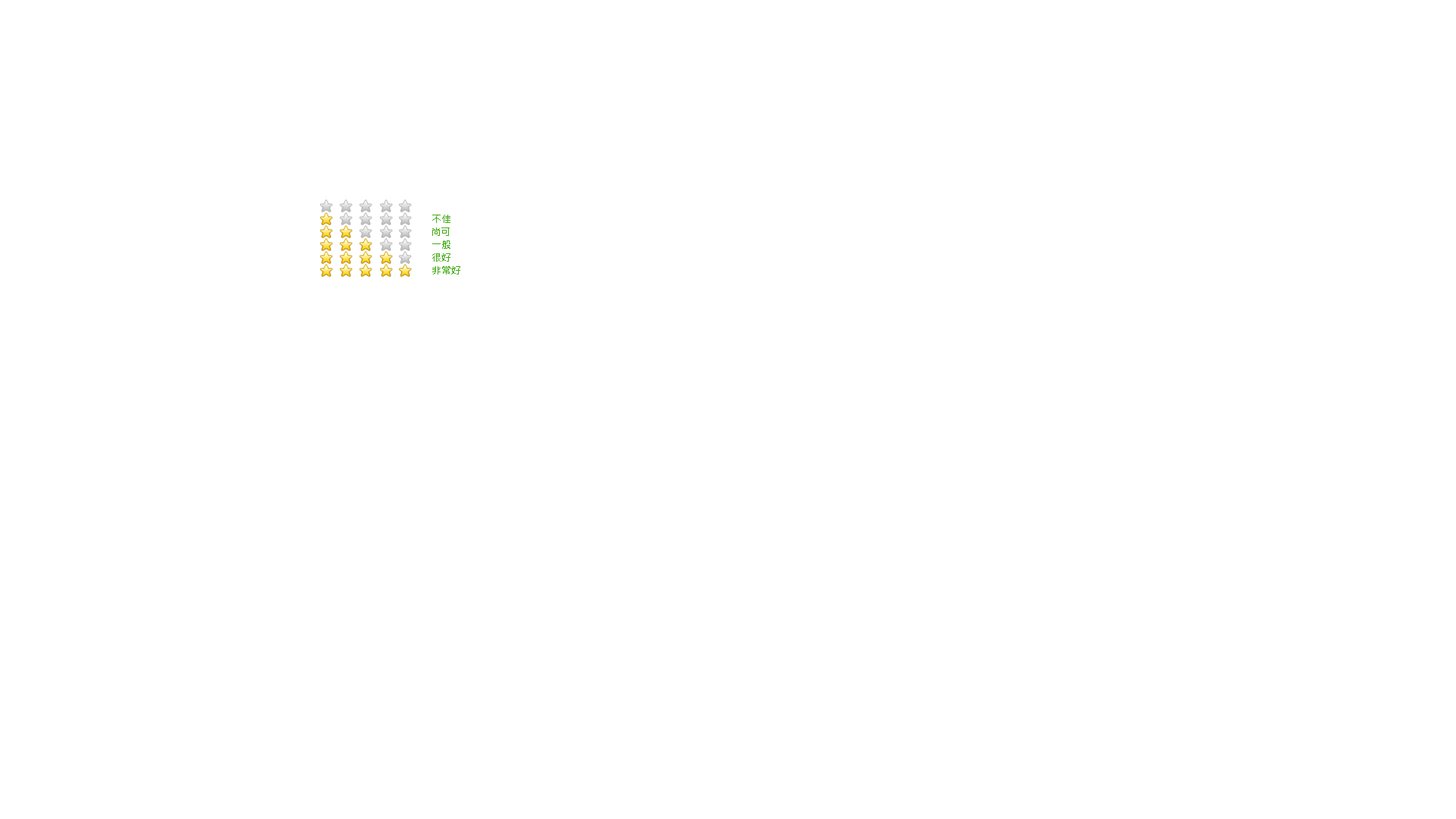
<style>
.page{position:relative;width:1456px;height:819px;background:#ffffff}
.page>*{position:absolute;margin:0}
.t1{font:9.9px "MicrosoftJhengHeiRegular";color:#42ab13}
</style>
<div class="page">
<p class="t1" style="left:432px;top:215px;width:18px;height:8px">不佳</p>
<p class="t1" style="left:432px;top:227px;width:18px;height:9px">尚可</p>
<p class="t1" style="left:432px;top:240px;width:18px;height:9px">一般</p>
<p class="t1" style="left:432px;top:253px;width:18px;height:9px">很好</p>
<p class="t1" style="left:432px;top:266px;width:28px;height:9px">非常好</p>
</div>
